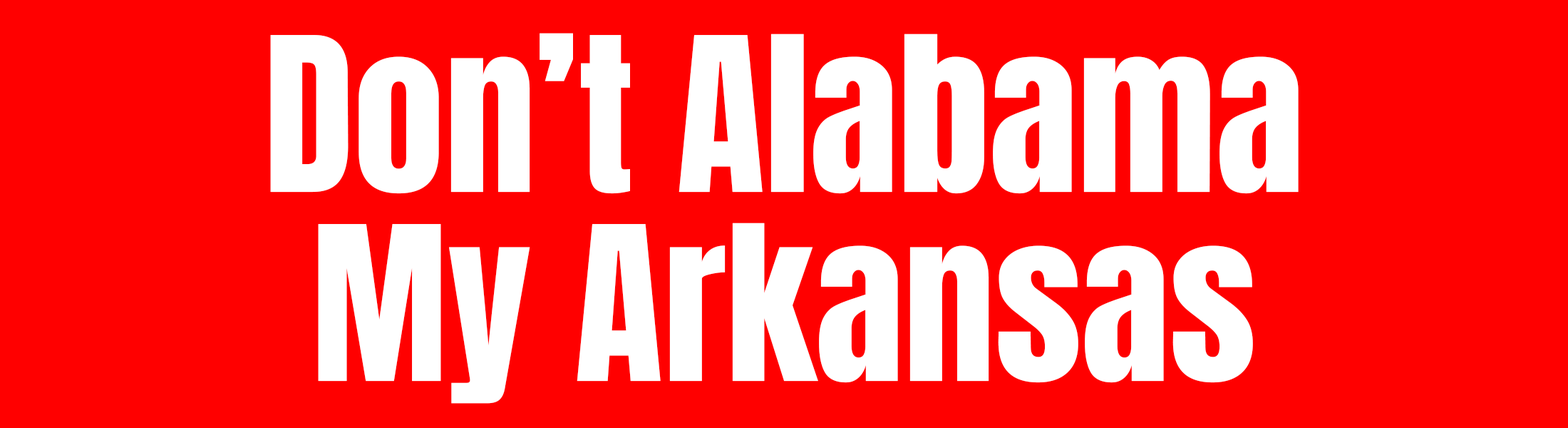
<style>
.page{position:relative;width:1568px;height:428px;background:#ff0000}
.page>*{position:absolute;margin:0}
.t1{font:182.5px "Anton-Regular";color:#ffffff}
</style>
<div class="page">
<p class="t1" style="left:270px;top:33px;width:1029px;height:161px">Don’t Alabama</p>
<p class="t1" style="left:318px;top:222px;width:935px;height:181px">My Arkansas</p>
</div>
